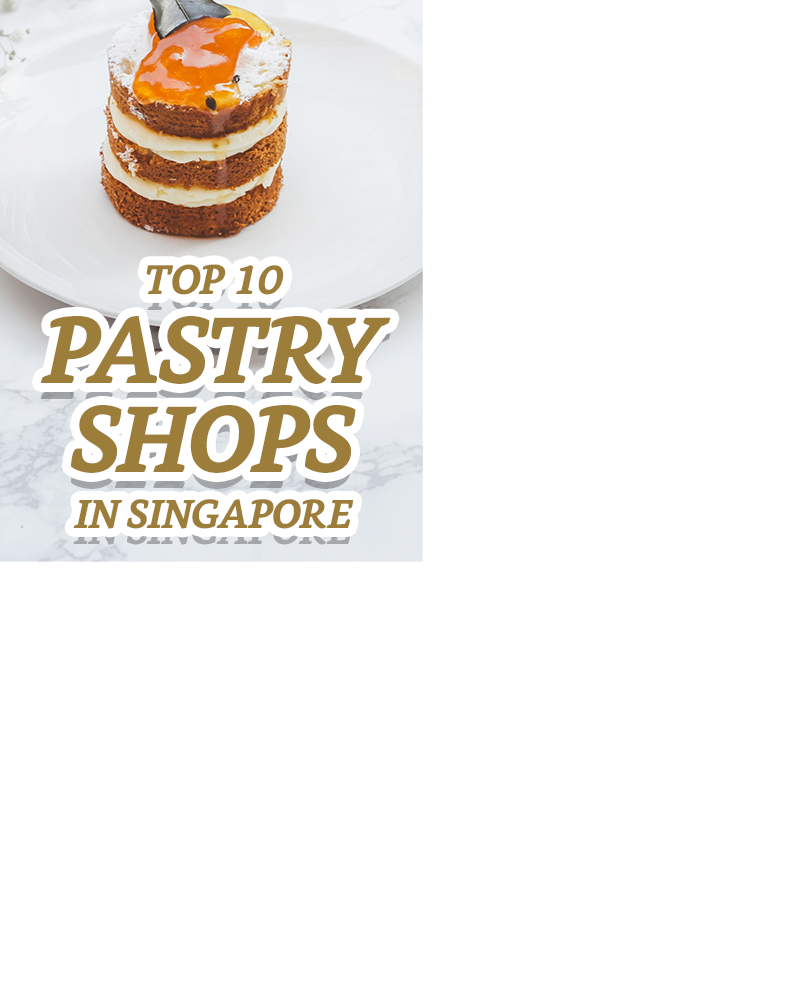
<style>
.page{position:relative;width:800px;height:1000px;background:#ffffff}
.page>*{position:absolute;margin:0}
.t1{font:94.3px/89.1px "Bookerly-BoldItalic";letter-spacing:-0.025em;color:#9c7d3a;text-transform:uppercase}
.t2{font:41.5px/76.5px "Bookerly-BoldItalic";letter-spacing:-0.025em;color:#9c7d3a;text-transform:uppercase}
.t3{font:40.5px/55.9px "Bookerly-BoldItalic";letter-spacing:-0.025em;color:#9c7d3a;text-transform:uppercase}
</style>
<div class="page">
<p class="t1" style="left:40px;top:264px;width:351px;height:265px;text-align:center"><span class="t2">top 10<br></span>PASTRY SHOPS<br><span class="t3">in SINGAPORE</span></p>
</div>
